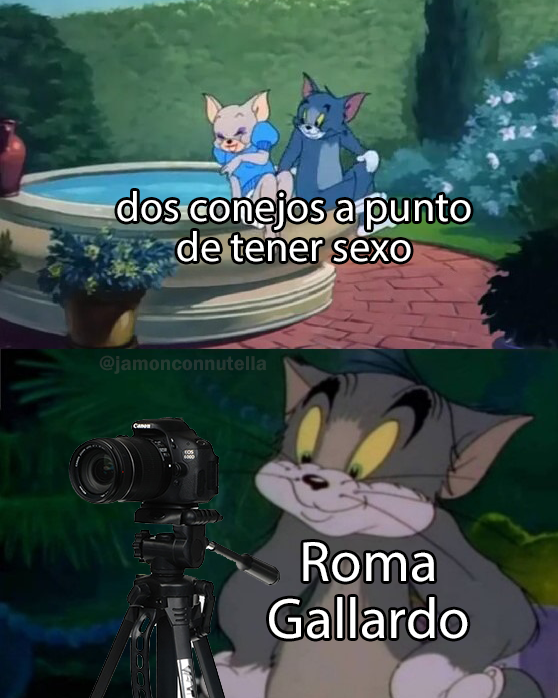
<style>
.page{position:relative;width:558px;height:698px}
.page>*{position:absolute;margin:0}
.t1{font:42.4px "MyriadPro-Regular";color:#ffffff}
.t2{font:20.6px "FranklinGothic-Demi";color:#243730}
.t3{font:57.6px "MyriadPro-Regular";color:#ffffff}
</style>
<div class="page">
<p class="t1" style="left:117px;top:191px;width:354px;height:71px;text-align:center">dos conejos a punto<br>de tener sexo</p>
<p class="t2" style="left:99px;top:355px;width:168px;height:19px">@jamonconnutella</p>
<p class="t3" style="left:269px;top:542px;width:199px;height:97px;text-align:center">Roma<br>Gallardo</p>
</div>
